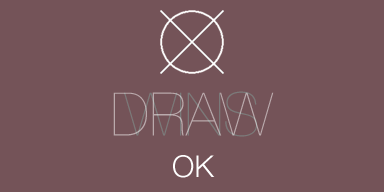
<style>
.page{position:relative;width:384px;height:192px;background:#745358}
.page>*{position:absolute;margin:0}
.t1{font:60px "HelveticaNeue-UltraLight";color:#baaaac}
.t2{font:60px "HelveticaNeue-UltraLight";color:#7a7a7a}
.t3{font:30px "HelveticaNeue-Light";color:#ffffff}
</style>
<div class="page">
<p class="t1" style="left:113px;top:92px;width:161px;height:44px">DRAW</p>
<p class="t2" style="left:124px;top:91px;width:133px;height:46px">WINS</p>
<p class="t2" style="left:124px;top:91px;width:133px;height:46px">WINS</p>
<p class="t3" style="left:173px;top:155px;width:42px;height:23px">OK</p>
</div>
